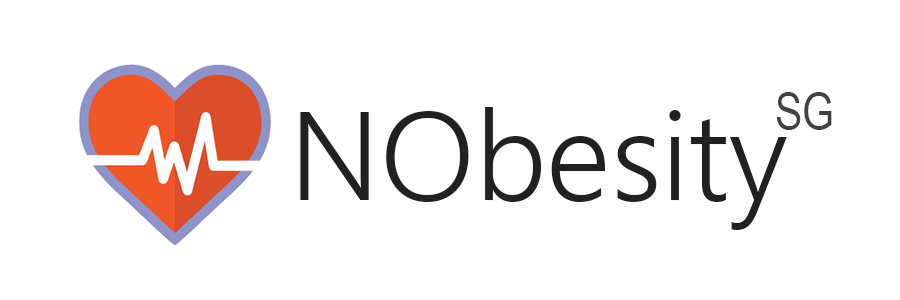
<style>
.page{position:relative;width:900px;height:300px;background:#ffffff}
.page>*{position:absolute;margin:0}
.t1{font:50px "ArialNarrow";color:#424242}
.t2{font:125px "SegoeUI-Semilight";color:#212121}
</style>
<div class="page">
<p class="t1" style="left:776px;top:92px;width:56px;height:38px">SG</p>
<p class="t2" style="left:300px;top:107px;width:487px;height:123px">NObesity</p>
</div>
